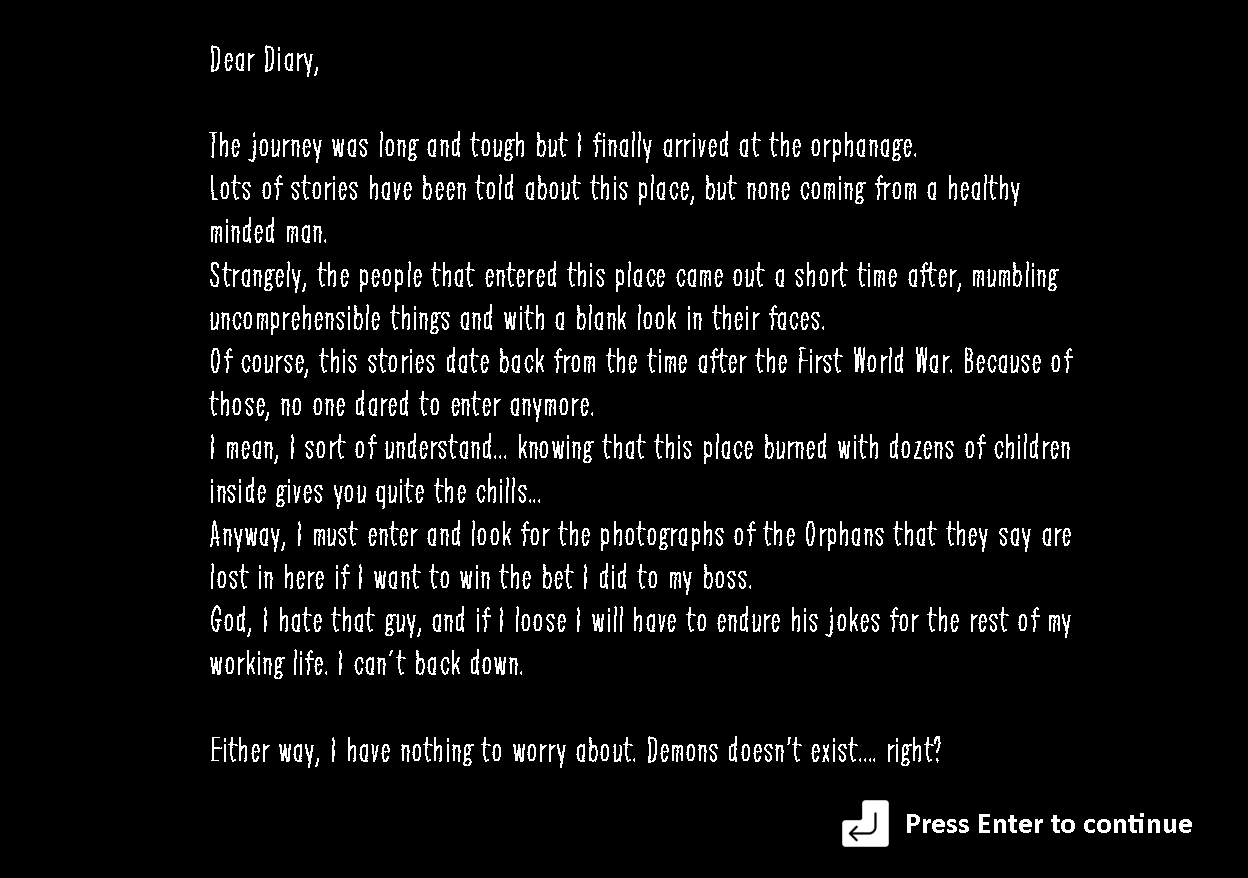
<style>
.page{position:relative;width:1248px;height:878px;background:#000000}
.page>*{position:absolute;margin:0}
.t1{font:36px "Greaterthanthesumofitspar";color:#ffffff}
.t2{font:29.5px "Calibri-Bold";color:#ffffff}
</style>
<div class="page">
<p class="t1" style="left:209px;top:45px;width:864px;height:723px">Dear Diary,<br><br>The journey was long and tough but I finally arrived at the orphanage.<br>Lots of stories have been told about this place, but none coming from a healthy minded man.<br>Strangely, the people that entered this place came out a short time after, mumbling uncomprehensible things and with a blank look in their faces.<br>Of course, this stories date back from the time after the First World War. Because of those, no one dared to enter anymore.<br>I mean, I sort of understand... knowing that this place burned with dozens of children inside gives you quite the chills...<br>Anyway, I must enter and look for the photographs of the Orphans that they say are lost in here if I want to win the bet I did to my boss.<br>God, I hate that guy, and if I loose I will have to endure his jokes for the rest of my working life. I can´t back down.<br><br>Either way, I have nothing to worry about. Demons doesn't exist.... right?</p>
<p class="t2" style="left:907px;top:813px;width:285px;height:20px">Press Enter to continue</p>
</div>
